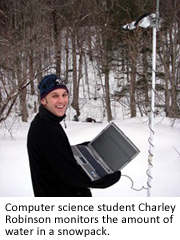
<style>
.page{position:relative;width:180px;height:240px}
.page>*{position:absolute;margin:0}
.t1{font:12px/12px "Calibri";letter-spacing:0.01em;color:#000000}
</style>
<div class="page">
<p class="t1" style="left:5px;top:202px;width:171px;height:35px">Computer science student Charley <br>Robinson monitors the amount of <br>water in a snowpack.</p>
</div>
